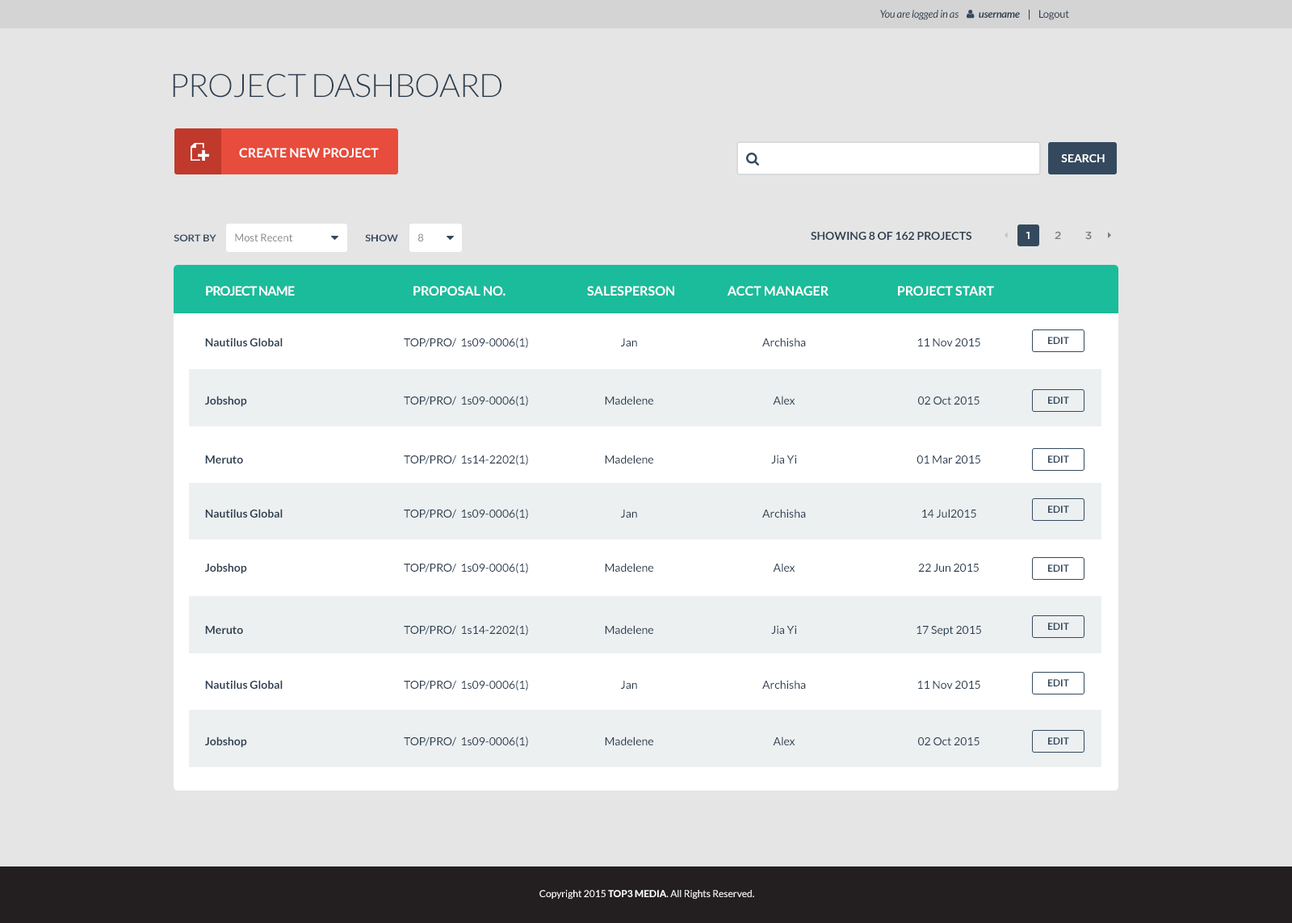
<style>
.page{position:relative;width:1292px;height:923px;background:#e5e5e5}
.page>*{position:absolute;margin:0}
.t1{font:10.5px "Lato-Italic";letter-spacing:-0.02em;color:#2d3e50}
.t2{font:10.5px "Lato-BoldItalic";letter-spacing:-0.02em;color:#2d3e50}
.t3{font:10.5px "Lato-Regular";letter-spacing:-0.02em;color:#2d3e50}
.t4{font:32.3px "Lato-Light";letter-spacing:-0.02em;color:#2d3e50;text-transform:uppercase}
.t5{font:12.9px "Lato-Bold";color:#ffffff;text-transform:uppercase}
.t6{font:11.3px "Lato-Bold";color:#ffffff;text-transform:uppercase}
.t7{font:10.5px "Lato-Regular";color:#898989}
.t8{font:11.3px "Lato-Bold";color:#2d3e50;text-transform:uppercase}
.t9{font:9.7px "Lato-Bold";color:#34495e;text-transform:uppercase;scale:1.08 1}
.t10{font:9.7px "Lato-Bold";color:#34495e;scale:1.08 1}
.t11{font:12.9px "Lato-Bold";letter-spacing:-0.05em;color:#ffffff;text-transform:uppercase}
.t12{font:11.3px "Lato-Bold";color:#2d3e50}
.t13{font:11.3px "Lato-Regular";color:#2d3e50}
.t14{font:9.7px "Lato-Bold";color:#34495e;text-transform:uppercase}
.t15{font:9.7px "Lato-Regular";color:#ffffff}
.t16{font:9.7px "Lato-Bold";color:#ffffff;text-transform:uppercase}
</style>
<div class="page">
<p class="t1" style="left:880px;top:10px;width:140px;height:10px">You are logged in as<span class="t2">           username</span></p>
<p class="t3" style="left:1029px;top:10px;width:40px;height:10px"><span class="t1">   |   </span> Logout</p>
<p class="t4" style="left:173px;top:73px;width:328px;height:25px">PROJECT DASHBOARD</p>
<p class="t5" style="left:239px;top:148px;width:140px;height:9px">Create New PROJECT</p>
<p class="t6" style="left:1061px;top:154px;width:44px;height:8px">Search</p>
<p class="t7" style="left:235px;top:233px;width:58px;height:8px">Most Recent</p>
<p class="t7" style="left:418px;top:233px;width:6px;height:8px">8</p>
<p class="t8" style="left:811px;top:232px;width:160px;height:8px">Showing 8 of 162 projects</p>
<p class="t9" style="left:174px;top:234px;width:42px;height:7px">SORT BY</p>
<p class="t10" style="left:365px;top:234px;width:33px;height:7px">SHOW</p>
<p class="t11" style="left:206px;top:286px;width:89px;height:10px">Project Name</p>
<p class="t5" style="left:413px;top:286px;width:92px;height:10px">PROPOSAL NO.</p>
<p class="t5" style="left:587px;top:286px;width:87px;height:10px">SALESPERSON</p>
<p class="t5" style="left:727px;top:286px;width:101px;height:10px">AccT manager</p>
<p class="t5" style="left:898px;top:286px;width:96px;height:10px">Project Start</p>
<p class="t12" style="left:205px;top:338px;width:78px;height:8px">Nautilus Global</p>
<p class="t13" style="left:404px;top:338px;width:124px;height:10px">TOP/PRO/  1s09-0006(1)</p>
<p class="t13" style="left:621px;top:338px;width:16px;height:8px">Jan</p>
<p class="t13" style="left:762px;top:338px;width:44px;height:8px">Archisha</p>
<p class="t13" style="left:917px;top:338px;width:63px;height:8px">11 Nov 2015</p>
<p class="t14" style="left:1048px;top:337px;width:21px;height:7px">EDIT</p>
<p class="t12" style="left:205px;top:396px;width:42px;height:11px">Jobshop</p>
<p class="t13" style="left:404px;top:396px;width:124px;height:10px">TOP/PRO/  1s09-0006(1)</p>
<p class="t13" style="left:605px;top:396px;width:48px;height:9px">Madelene</p>
<p class="t13" style="left:773px;top:396px;width:22px;height:9px">Alex</p>
<p class="t13" style="left:918px;top:396px;width:61px;height:9px">02 Oct 2015</p>
<p class="t14" style="left:1048px;top:396px;width:21px;height:8px">EDIT</p>
<p class="t12" style="left:205px;top:455px;width:38px;height:8px">Meruto</p>
<p class="t13" style="left:404px;top:455px;width:124px;height:10px">TOP/PRO/  1s14-2202(1)</p>
<p class="t13" style="left:605px;top:455px;width:48px;height:8px">Madelene</p>
<p class="t13" style="left:771px;top:455px;width:26px;height:8px">Jia Yi</p>
<p class="t13" style="left:916px;top:455px;width:64px;height:8px">01 Mar 2015</p>
<p class="t14" style="left:1048px;top:455px;width:21px;height:8px">EDIT</p>
<p class="t12" style="left:205px;top:509px;width:78px;height:9px">Nautilus Global</p>
<p class="t13" style="left:404px;top:509px;width:124px;height:10px">TOP/PRO/  1s09-0006(1)</p>
<p class="t13" style="left:621px;top:510px;width:16px;height:8px">Jan</p>
<p class="t13" style="left:762px;top:509px;width:44px;height:9px">Archisha</p>
<p class="t13" style="left:922px;top:509px;width:54px;height:9px">14 Jul2015</p>
<p class="t14" style="left:1048px;top:505px;width:21px;height:8px">EDIT</p>
<p class="t12" style="left:205px;top:563px;width:42px;height:11px">Jobshop</p>
<p class="t13" style="left:404px;top:563px;width:124px;height:10px">TOP/PRO/  1s09-0006(1)</p>
<p class="t13" style="left:605px;top:563px;width:48px;height:9px">Madelene</p>
<p class="t13" style="left:773px;top:563px;width:22px;height:9px">Alex</p>
<p class="t13" style="left:918px;top:564px;width:61px;height:8px">22 Jun 2015</p>
<p class="t14" style="left:1048px;top:564px;width:21px;height:8px">EDIT</p>
<p class="t12" style="left:205px;top:626px;width:38px;height:8px">Meruto</p>
<p class="t13" style="left:404px;top:625px;width:124px;height:10px">TOP/PRO/  1s14-2202(1)</p>
<p class="t13" style="left:605px;top:625px;width:48px;height:9px">Madelene</p>
<p class="t13" style="left:771px;top:625px;width:26px;height:9px">Jia Yi</p>
<p class="t13" style="left:916px;top:626px;width:65px;height:10px">17 Sept 2015</p>
<p class="t14" style="left:1048px;top:623px;width:21px;height:7px">EDIT</p>
<p class="t12" style="left:205px;top:680px;width:78px;height:9px">Nautilus Global</p>
<p class="t13" style="left:404px;top:680px;width:124px;height:10px">TOP/PRO/  1s09-0006(1)</p>
<p class="t13" style="left:621px;top:681px;width:16px;height:8px">Jan</p>
<p class="t13" style="left:762px;top:680px;width:44px;height:9px">Archisha</p>
<p class="t13" style="left:917px;top:681px;width:63px;height:8px">11 Nov 2015</p>
<p class="t14" style="left:1048px;top:679px;width:21px;height:7px">EDIT</p>
<p class="t12" style="left:205px;top:736px;width:42px;height:12px">Jobshop</p>
<p class="t13" style="left:404px;top:736px;width:124px;height:11px">TOP/PRO/  1s09-0006(1)</p>
<p class="t13" style="left:605px;top:736px;width:48px;height:9px">Madelene</p>
<p class="t13" style="left:773px;top:736px;width:22px;height:9px">Alex</p>
<p class="t13" style="left:918px;top:737px;width:61px;height:8px">02 Oct 2015</p>
<p class="t14" style="left:1048px;top:737px;width:21px;height:8px">EDIT</p>
<p class="t15" style="left:539px;top:890px;width:215px;height:9px">Copyright 2015 <span class="t16">Top3 Media</span>. All Rights Reserved.</p>
</div>
